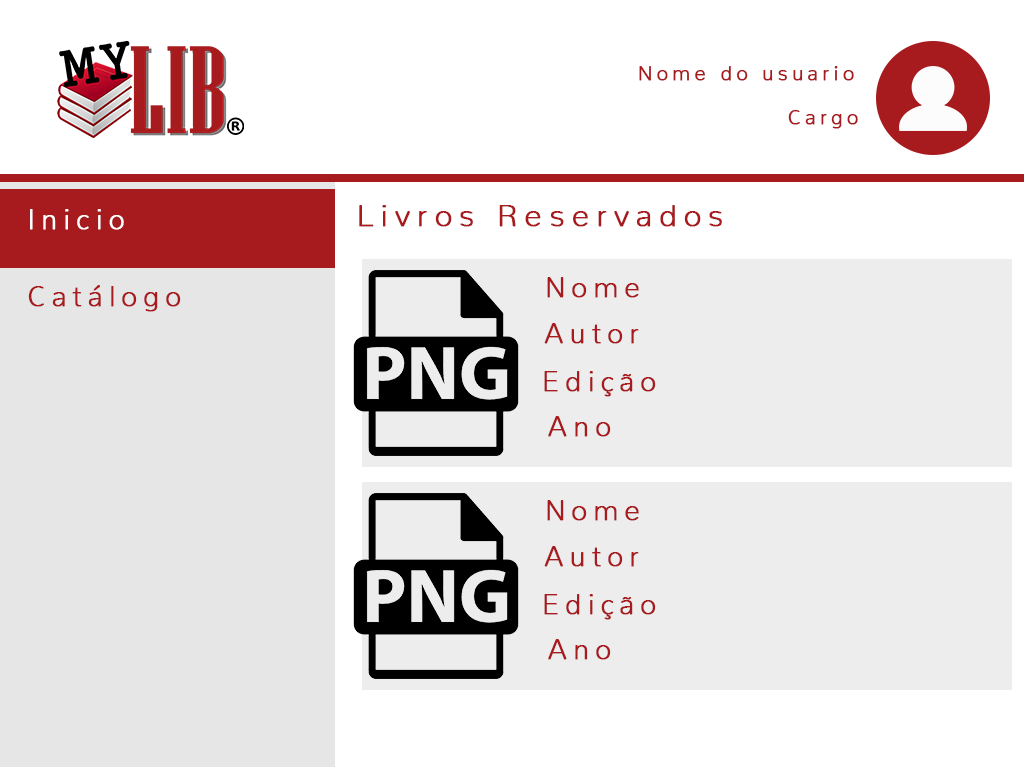
<style>
.page{position:relative;width:1024px;height:768px;background:#ffffff}
.page>*{position:absolute;margin:0}
.t1{font:20px "Nunito-ExtraLight";letter-spacing:0.2em;color:#a71b1e;font-weight:bold}
.t2{font:28px "Nunito-ExtraLight";letter-spacing:0.2em;color:#ffffff;font-weight:bold}
.t3{font:31.2px "Nunito-ExtraLight";letter-spacing:0.2em;color:#a71b1e;font-weight:bold}
.t4{font:28px "Nunito-ExtraLight";letter-spacing:0.2em;color:#a71b1e;font-weight:bold}
</style>
<div class="page">
<p class="t1" style="left:639px;top:66px;width:215px;height:15px">Nome do usuario</p>
<p class="t1" style="left:788px;top:110px;width:70px;height:19px">Cargo</p>
<p class="t2" style="left:30px;top:209px;width:94px;height:21px">Inicio</p>
<p class="t3" style="left:359px;top:205px;width:363px;height:22px">Livros Reservados</p>
<p class="t4" style="left:547px;top:277px;width:92px;height:21px">Nome</p>
<p class="t4" style="left:28px;top:285px;width:153px;height:27px">Catálogo</p>
<p class="t4" style="left:544px;top:323px;width:95px;height:21px">Autor</p>
<p class="t4" style="left:544px;top:371px;width:112px;height:26px">Edição</p>
<p class="t4" style="left:548px;top:416px;width:63px;height:21px">Ano</p>
<p class="t4" style="left:547px;top:500px;width:92px;height:21px">Nome</p>
<p class="t4" style="left:544px;top:546px;width:95px;height:21px">Autor</p>
<p class="t4" style="left:544px;top:594px;width:112px;height:26px">Edição</p>
<p class="t4" style="left:548px;top:639px;width:63px;height:21px">Ano</p>
</div>
